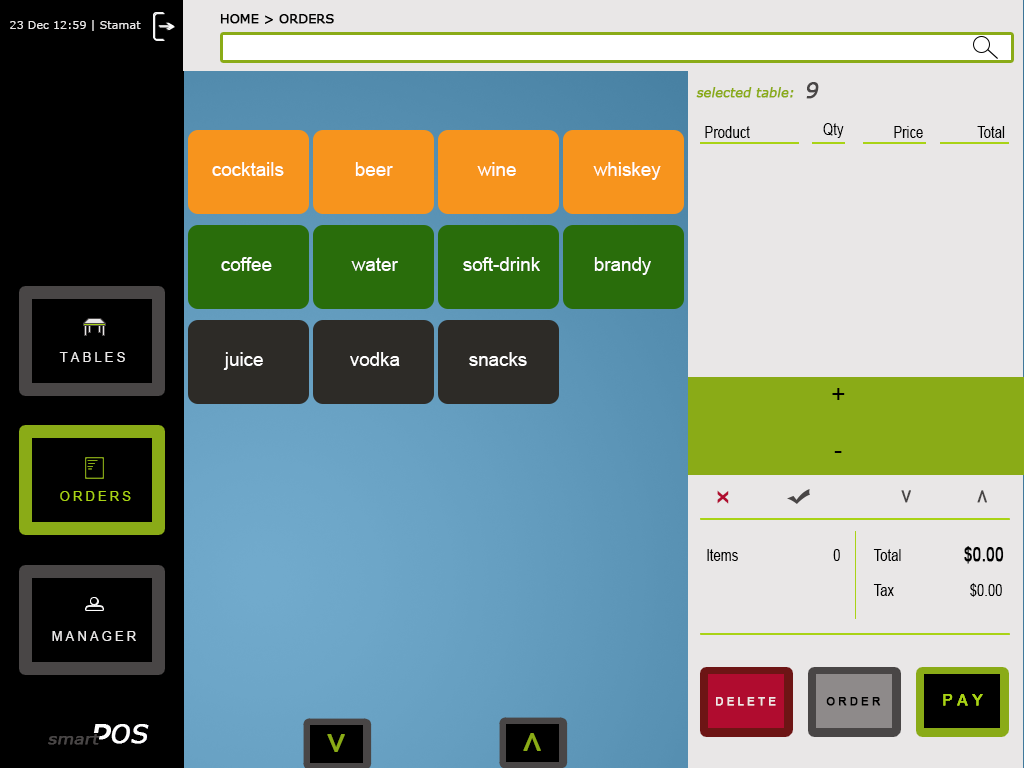
<style>
.page{position:relative;width:1024px;height:768px;background:#e9e7e7}
.page>*{position:absolute;margin:0}
.t1{font:12.5px "Verdana";color:#000000;font-weight:bold}
.t2{font:11.2px "Verdana";color:#e9e7e7}
.t3{font:12.5px "Verdana";color:#8aab17;font-weight:bold;font-style:italic}
.t4{font:20.8px "Verdana";color:#494646;font-weight:bold;font-style:italic}
.t5{font:16.2px "ArialMT";color:#000000;scale:0.81 1}
.t6{font:18.8px "ArialMT";color:#ffffff}
.t7{font:12.5px "ArialMT";color:#e9e7e7}
.t8{font:25px "ArialMT";color:#000000}
.t9{font:12.5px "ArialMT";color:#a9d316}
.t10{font:19.8px "ArialMT";color:#b00c2f;font-weight:bold;scale:1.23 1}
.t11{font:19.8px "ArialMT";color:#494646;font-weight:bold;scale:1.23 1}
.t12{font:18.8px "ArialMT";color:#000000;font-weight:bold;scale:0.81 1}
.t13{font:10.6px "ArialMT";color:#efe7e7;font-weight:bold}
.t14{font:10.6px "ArialMT";color:#000000;font-weight:bold}
.t15{font:14.6px "ArialMT";color:#a9d316;font-weight:bold}
.t16{font:25px "Verdana";color:#ffffff;font-weight:bold;font-style:italic}
.t17{font:15px "Verdana";color:#494646;font-weight:bold;font-style:italic;scale:1.11 1}
.t18{font:34.9px "ArialMT";color:#8aab17;font-weight:bold}
</style>
<div class="page">
<p class="t1" style="left:220px;top:14px;width:114px;height:10px">HOME &gt; ORDERS</p>
<p class="t2" style="left:10px;top:20px;width:131px;height:11px">23 Dec 12:59 | Stamat</p>
<p class="t3" style="left:696px;top:87px;width:98px;height:11px">selected table:</p>
<p class="t4" style="left:806px;top:82px;width:13px;height:17px">9</p>
<p class="t5" style="left:705px;top:126px;width:45px;height:12px">Product</p>
<p class="t5" style="left:823px;top:123px;width:21px;height:15px">Qty</p>
<p class="t5" style="left:894px;top:126px;width:29px;height:12px">Price</p>
<p class="t5" style="left:977px;top:126px;width:28px;height:12px">Total</p>
<p class="t6" style="left:212px;top:162px;width:72px;height:14px">cocktails</p>
<p class="t6" style="left:355px;top:162px;width:38px;height:14px">beer</p>
<p class="t6" style="left:477px;top:162px;width:39px;height:14px">wine</p>
<p class="t6" style="left:593px;top:162px;width:68px;height:18px">whiskey</p>
<p class="t6" style="left:221px;top:257px;width:51px;height:14px">coffee</p>
<p class="t6" style="left:351px;top:257px;width:47px;height:14px">water</p>
<p class="t6" style="left:463px;top:257px;width:77px;height:14px">soft-drink</p>
<p class="t6" style="left:594px;top:257px;width:57px;height:18px">brandy</p>
<p class="t7" style="left:59px;top:352px;width:66px;height:10px">T A B L E S</p>
<p class="t6" style="left:223px;top:352px;width:40px;height:18px">juice</p>
<p class="t6" style="left:350px;top:352px;width:50px;height:14px">vodka</p>
<p class="t6" style="left:469px;top:352px;width:58px;height:14px">snacks</p>
<p class="t8" style="left:832px;top:388px;width:13px;height:12px">+</p>
<p class="t8" style="left:834px;top:451px;width:8px;height:2px">-</p>
<p class="t9" style="left:60px;top:491px;width:71px;height:10px">O R D E R S</p>
<p class="t10" style="left:717px;top:490px;width:12px;height:14px;rotate:-90deg">x</p>
<p class="t11" style="left:901px;top:490px;width:10px;height:13px;rotate:90deg">&gt;</p>
<p class="t11" style="left:977px;top:490px;width:10px;height:13px;rotate:-90deg">&gt;</p>
<p class="t5" style="left:707px;top:549px;width:31px;height:12px">Items</p>
<p class="t5" style="left:833px;top:549px;width:7px;height:12px">0</p>
<p class="t5" style="left:873px;top:549px;width:28px;height:12px">Total</p>
<p class="t12" style="left:964px;top:546px;width:40px;height:18px">$0.00</p>
<p class="t5" style="left:873px;top:584px;width:21px;height:12px">Tax</p>
<p class="t5" style="left:970px;top:583px;width:32px;height:14px">$0.00</p>
<p class="t7" style="left:52px;top:631px;width:84px;height:10px">M A N A G E R</p>
<p class="t13" style="left:716px;top:697px;width:60px;height:9px">D E L E T E</p>
<p class="t14" style="left:826px;top:697px;width:55px;height:9px">O R D E R</p>
<p class="t15" style="left:943px;top:694px;width:40px;height:12px">P A Y</p>
<p class="t15" style="left:943px;top:694px;width:40px;height:12px">P A Y</p>
<p class="t16" style="left:111px;top:724px;width:38px;height:20px">OS</p>
<p class="t16" style="left:112px;top:724px;width:38px;height:20px">OS</p>
<p class="t17" style="left:48px;top:734px;width:52px;height:11px">smart</p>
<p class="t18" style="left:327px;top:734px;width:18px;height:18px;rotate:-90deg">&lt;</p>
<p class="t18" style="left:523px;top:733px;width:18px;height:18px;rotate:-90deg">&gt;</p>
</div>
